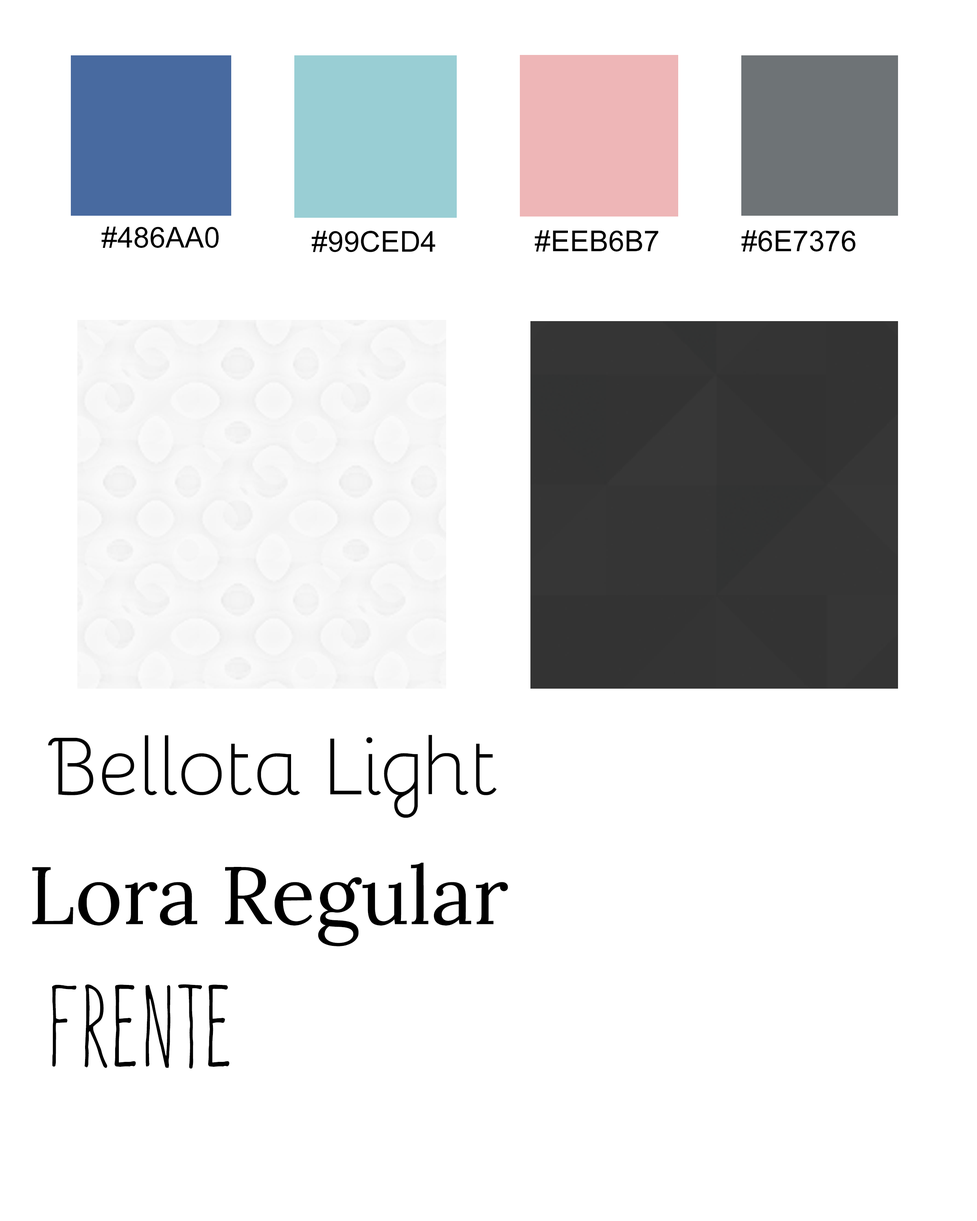
<style>
.page{position:relative;width:977px;height:1221px;background:#ffffff}
.page>*{position:absolute;margin:0}
.t1{font:28.8px "ArialMT";color:#000000}
.t2{font:81.4px "Bellota-Light";color:#000000}
.t3{font:81.4px "Lora-Regular";color:#000000}
.t4{font:101.7px "FrenteH1-Regular";color:#000000}
</style>
<div class="page">
<p class="t1" style="left:101px;top:226px;width:118px;height:22px">#486AA0</p>
<p class="t1" style="left:311px;top:231px;width:124px;height:21px">#99CED4</p>
<p class="t1" style="left:534px;top:230px;width:124px;height:22px">#EEB6B7</p>
<p class="t1" style="left:741px;top:230px;width:114px;height:22px">#6E7376</p>
<p class="t2" style="left:48px;top:735px;width:448px;height:83px">Bellota Light</p>
<p class="t3" style="left:32px;top:862px;width:476px;height:84px">Lora Regular</p>
<p class="t4" style="left:52px;top:984px;width:178px;height:85px">Frente</p>
</div>
